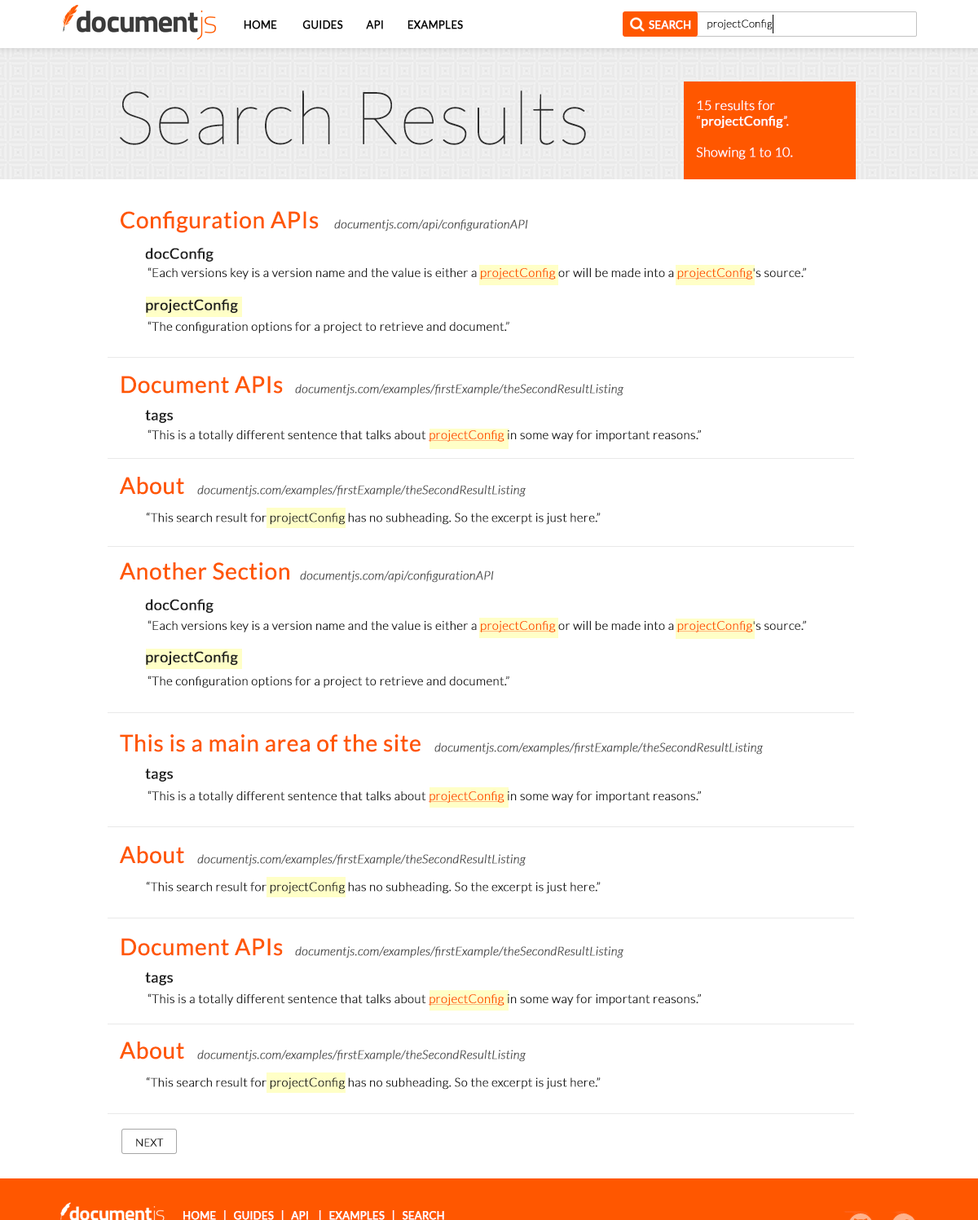
<style>
.page{position:relative;width:978px;height:1220px;background:#ffffff}
.page>*{position:absolute;margin:0}
.t1{font:10.6px "Lato-Regular";color:#000000;text-transform:uppercase;font-weight:bold}
.t2{font:10.6px "Lato-Regular";color:#ffffff;text-transform:uppercase;font-weight:bold}
.t3{font:10.6px "Lato-Light";color:#000000;font-weight:bold}
.t4{font:73.3px "Lato-Hairline";color:#2d2d2d;font-weight:bold}
.t5{font:13px "Lato-Light";color:#ffffff;font-weight:bold}
.t6{font:13px "Lato-Regular";color:#ffffff;font-weight:bold}
.t7{font:22.8px "Lato-Regular";color:#ff5700;font-weight:bold}
.t8{font:12.2px "Lato-LightItalic";color:#4f4f4f;font-weight:bold}
.t9{font:14.7px "Lato-Regular";color:#1f1f1f;font-weight:bold}
.t10{font:12.2px "Lato-Light";color:#1f1f1f;font-weight:bold}
.t11{font:12.2px "Lato-Light";color:#ff5700;font-weight:bold;text-decoration:underline}
.t12{font:10.6px "Lato-Light";color:#000000;text-transform:uppercase;font-weight:bold}
</style>
<div class="page">
<p class="t1" style="left:244px;top:20px;width:219px;height:9px">Home           Guides          API          Examples</p>
<p class="t2" style="left:649px;top:20px;width:42px;height:9px">Search</p>
<p class="t3" style="left:707px;top:20px;width:65px;height:10px">projectConfig</p>
<p class="t4" style="left:120px;top:90px;width:466px;height:55px">Search Results</p>
<p class="t5" style="left:696px;top:100px;width:97px;height:60px">15 results for “<span class="t6">projectConfig</span>”.<br><br>Showing 1 to 10.</p>
<p class="t7" style="left:121px;top:211px;width:198px;height:22px">Configuration APIs</p>
<p class="t8" style="left:334px;top:219px;width:194px;height:12px">documentjs.com/api/configurationAPI</p>
<p class="t9" style="left:145px;top:248px;width:68px;height:14px">docConfig</p>
<p class="t10" style="left:147px;top:267px;width:659px;height:12px">“Each versions key is a version name and the value is either a <span class="t11">projectConfig</span> or will be made into a <span class="t11">projectConfig</span>'s source.”</p>
<p class="t9" style="left:146px;top:299px;width:92px;height:14px">projectConfig</p>
<p class="t10" style="left:147px;top:321px;width:362px;height:12px">“The configuration options for a project to retrieve and document.”</p>
<p class="t7" style="left:121px;top:376px;width:162px;height:18px">Document APIs</p>
<p class="t8" style="left:295px;top:384px;width:329px;height:12px">documentjs.com/examples/firstExample/theSecondResultListing</p>
<p class="t9" style="left:145px;top:410px;width:28px;height:13px">tags</p>
<p class="t10" style="left:147px;top:429px;width:554px;height:13px">“This is a totally different sentence that talks about <span class="t11">projectConfig</span> in some way for important reasons.”</p>
<p class="t7" style="left:120px;top:477px;width:64px;height:18px">About</p>
<p class="t8" style="left:197px;top:485px;width:329px;height:12px">documentjs.com/examples/firstExample/theSecondResultListing</p>
<p class="t10" style="left:147px;top:512px;width:453px;height:13px">“This search result for projectConfig has no subheading. So the excerpt is just here.”</p>
<p class="t7" style="left:120px;top:562px;width:169px;height:18px">Another Section</p>
<p class="t8" style="left:300px;top:570px;width:194px;height:13px">documentjs.com/api/configurationAPI</p>
<p class="t9" style="left:145px;top:599px;width:68px;height:14px">docConfig</p>
<p class="t10" style="left:147px;top:620px;width:659px;height:12px">“Each versions key is a version name and the value is either a <span class="t11">projectConfig</span> or will be made into a <span class="t11">projectConfig</span>'s source.”</p>
<p class="t9" style="left:146px;top:651px;width:92px;height:14px">projectConfig</p>
<p class="t10" style="left:147px;top:675px;width:362px;height:13px">“The configuration options for a project to retrieve and document.”</p>
<p class="t7" style="left:120px;top:734px;width:300px;height:18px">This is a main area of the site</p>
<p class="t8" style="left:434px;top:742px;width:329px;height:12px">documentjs.com/examples/firstExample/theSecondResultListing</p>
<p class="t9" style="left:145px;top:768px;width:28px;height:13px">tags</p>
<p class="t10" style="left:147px;top:790px;width:554px;height:13px">“This is a totally different sentence that talks about <span class="t11">projectConfig</span> in some way for important reasons.”</p>
<p class="t7" style="left:120px;top:846px;width:64px;height:18px">About</p>
<p class="t8" style="left:197px;top:854px;width:329px;height:12px">documentjs.com/examples/firstExample/theSecondResultListing</p>
<p class="t10" style="left:147px;top:882px;width:453px;height:12px">“This search result for projectConfig has no subheading. So the excerpt is just here.”</p>
<p class="t7" style="left:121px;top:938px;width:162px;height:18px">Document APIs</p>
<p class="t8" style="left:295px;top:946px;width:329px;height:12px">documentjs.com/examples/firstExample/theSecondResultListing</p>
<p class="t9" style="left:145px;top:972px;width:28px;height:13px">tags</p>
<p class="t10" style="left:147px;top:993px;width:554px;height:12px">“This is a totally different sentence that talks about <span class="t11">projectConfig</span> in some way for important reasons.”</p>
<p class="t7" style="left:120px;top:1041px;width:64px;height:18px">About</p>
<p class="t8" style="left:197px;top:1049px;width:329px;height:13px">documentjs.com/examples/firstExample/theSecondResultListing</p>
<p class="t10" style="left:147px;top:1077px;width:453px;height:12px">“This search result for projectConfig has no subheading. So the excerpt is just here.”</p>
<p class="t12" style="left:136px;top:1138px;width:28px;height:8px">Next</p>
<p class="t2" style="left:183px;top:1210px;width:261px;height:11px">Home   |   Guides   |   API    |   Examples   |   Search</p>
</div>
